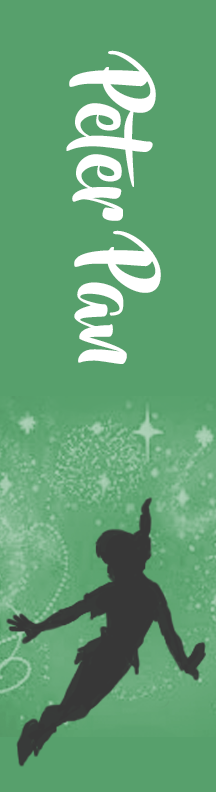
<style>
.page{position:relative;width:216px;height:792px;background:#57a06c}
.page>*{position:absolute;margin:0}
.t1{font:85px "BeyondTheMountains";color:#ffffff}
</style>
<div class="page">
<p class="t1" style="left:66px;top:50px;width:95px;height:314px;rotate:88deg">Peter Pan</p>
</div>
